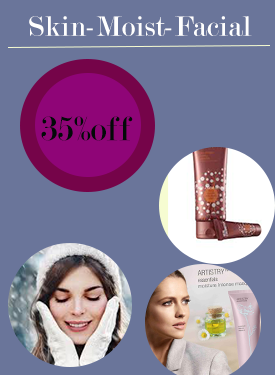
<style>
.page{position:relative;width:275px;height:375px;background:#6a759a}
.page>*{position:absolute;margin:0}
.t1{font:30px "Modern-Regular";color:#ffffff}
.t2{font:36.2px "Modern-Regular";color:#020a08}
</style>
<div class="page">
<p class="t1" style="left:29px;top:16px;width:223px;height:20px">Skin-Moist-Facial</p>
<p class="t2" style="left:41px;top:116px;width:92px;height:25px">35%off</p>
</div>
